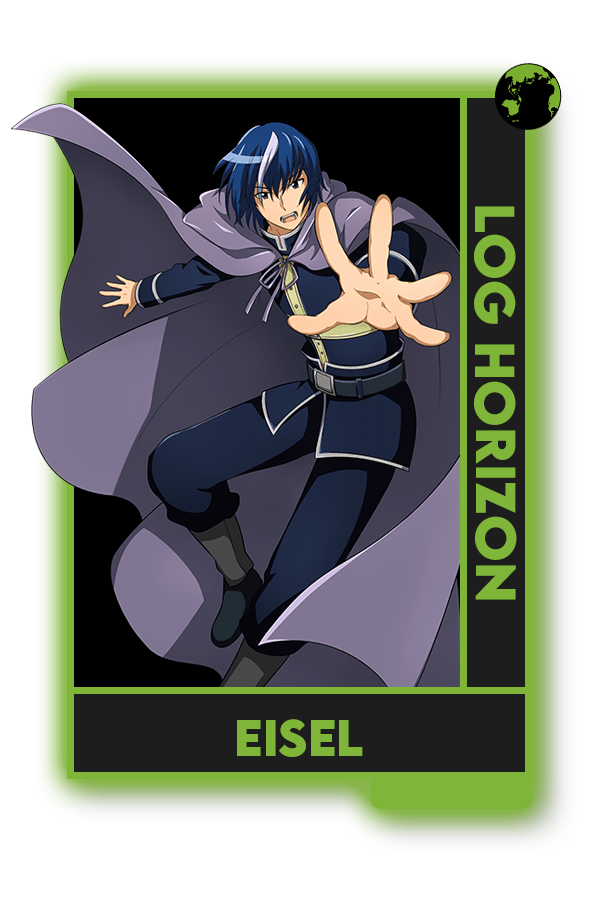
<style>
.page{position:relative;width:600px;height:900px;background:#ffffff}
.page>*{position:absolute;margin:0}
.t1{font:50px "LEMONMILK-Bold";color:#7fad41}
.t2{font:45.8px "LEMONMILK-Bold";color:#7fad41}
</style>
<div class="page">
<p class="t1" style="left:474px;top:206px;width:43px;height:394px;rotate:90deg">Log Horizon</p>
<p class="t2" style="left:237px;top:719px;width:126px;height:38px">Eisel</p>
</div>
